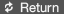
<style>
.page{position:relative;width:64px;height:14px;background:#535353}
.page>*{position:absolute;margin:0}
.t1{font:13px "HelveticaNeue";color:#f5f5f5}
</style>
<div class="page">
<p class="t1" style="left:20px;top:2px;width:39px;height:11px">Return</p>
</div>
